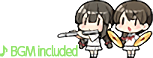
<style>
.page{position:relative;width:153px;height:58px;background:#ffffff}
.page>*{position:absolute;margin:0}
.t1{font:13px "UDShinGoPro-Light";letter-spacing:-0.08em;color:#91e469;font-weight:bold;scale:0.8 1}
</style>
<div class="page">
<p class="t1" style="left:11px;top:45px;width:67px;height:12px">BGM included</p>
</div>
